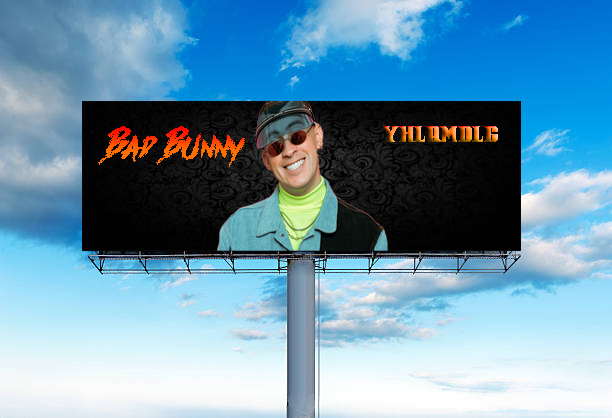
<style>
.page{position:relative;width:612px;height:418px}
.page>*{position:absolute;margin:0}
.t1{font:41.7px "Againts"}
.t2{font:16.7px "Pirate-Keg"}
</style>
<div class="page">
<p class="t1" style="left:98px;top:126px;width:147px;height:41px">Bad Bunny</p>
<p class="t2" style="left:383px;top:126px;width:115px;height:16px">yhlqmdlg</p>
</div>
